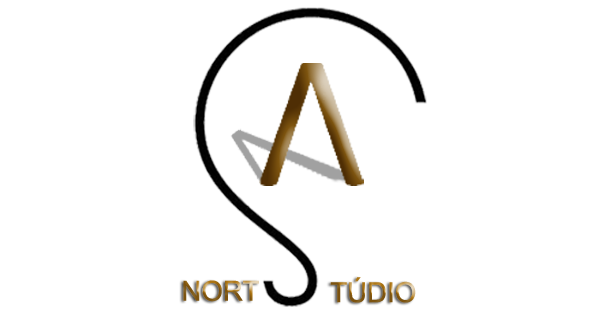
<style>
.page{position:relative;width:600px;height:315px;background:#ffffff}
.page>*{position:absolute;margin:0}
.t1{font:27.7px "ArialMT"}
</style>
<div class="page">
<p class="t1" style="left:183px;top:280px;width:76px;height:22px">NORT</p>
<p class="t1" style="left:330px;top:277px;width:86px;height:26px">TÚDIO</p>
</div>
